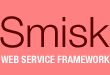
<style>
.page{position:relative;width:110px;height:75px;background:#ff8080}
.page>*{position:absolute;margin:0}
.t1{font:42px "HelveticaNeue-Light";color:#590101}
.t2{font:10px "HelveticaNeue-CondensedBold";color:#ffffff;text-transform:uppercase}
</style>
<div class="page">
<p class="t1" style="left:0px;top:16px;width:110px;height:32px">Smisk</p>
<p class="t2" style="left:1px;top:55px;width:109px;height:8px">Web Service Framework</p>
</div>
